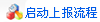
<style>
.page{position:relative;width:100px;height:22px;background:#ffffff}
.page>*{position:absolute;margin:0}
.t1{font:12px "SimSun";letter-spacing:0.025em;color:#005cea}
.t2{font:12px "SimSun";letter-spacing:0.025em}
</style>
<div class="page">
<p class="t1" style="left:25px;top:7px;width:72px;height:11px">启动上报流程</p>
<p class="t2" style="left:26px;top:7px;width:72px;height:11px">启动上报流程</p>
</div>
